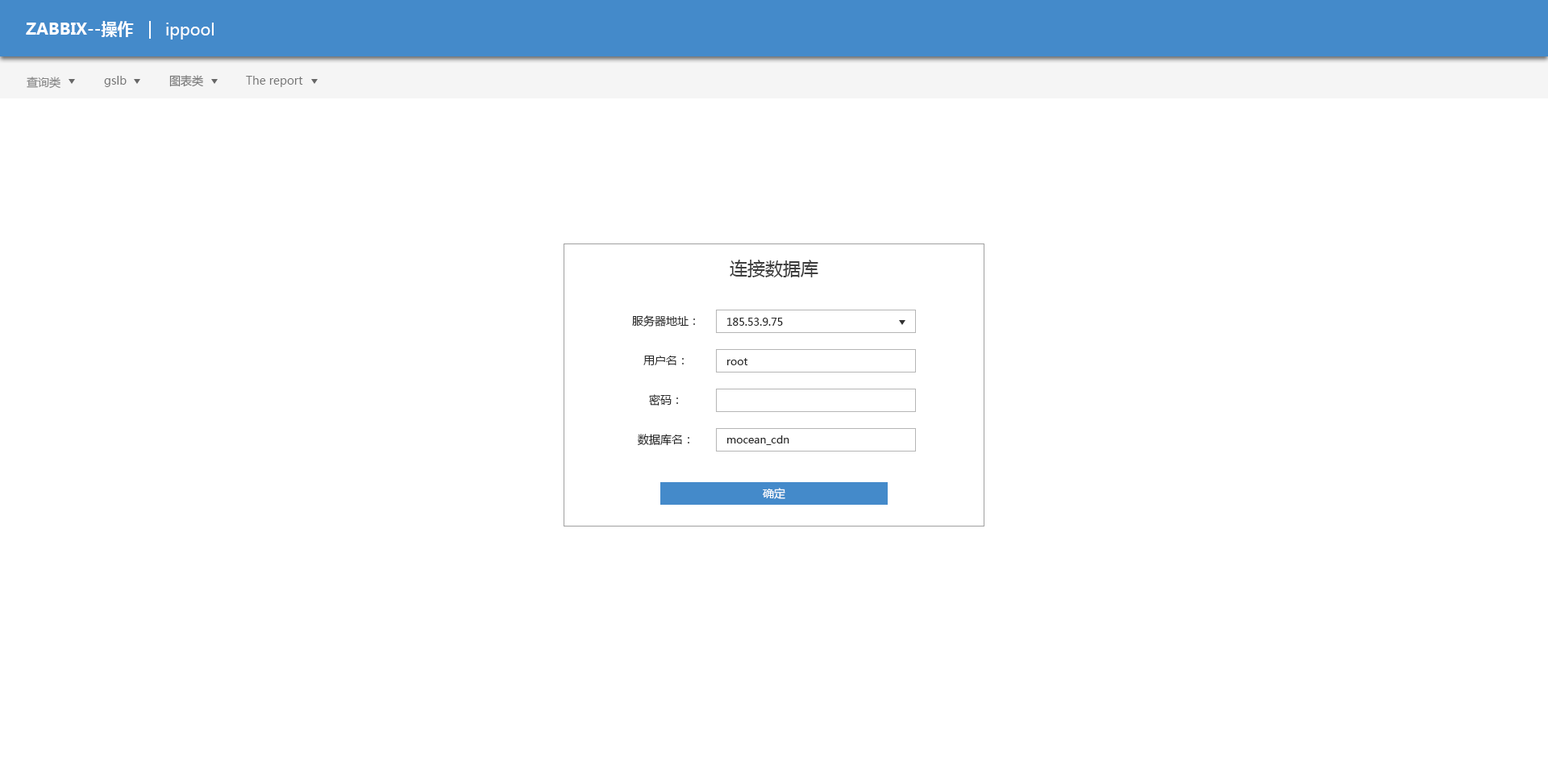
<style>
.page{position:relative;width:1548px;height:770px;background:#ffffff}
.page>*{position:absolute;margin:0}
.t1{font:16.1px "MicrosoftYaHei-Bold";color:#ffffff}
.t2{font:16.1px "MicrosoftYaHei";color:#ffffff}
.t3{font:11.3px "MicrosoftYaHei";color:#838383}
.t4{font:11.3px "MicrosoftYaHei";color:#767676}
.t5{font:17.7px "MicrosoftYaHei";color:#3e3e3e}
.t6{font:11.3px "MicrosoftYaHei";color:#292929}
.t7{font:10.5px "MicrosoftYaHei";color:#292929}
.t8{font:11.3px "MicrosoftYaHei";color:#ffffff}
</style>
<div class="page">
<p class="t1" style="left:26px;top:21px;width:108px;height:16px">ZABBIX--操作</p>
<p class="t2" style="left:166px;top:23px;width:48px;height:17px">ippool</p>
<p class="t3" style="left:27px;top:77px;width:33px;height:12px">查询类</p>
<p class="t4" style="left:104px;top:76px;width:23px;height:11px">gslb</p>
<p class="t4" style="left:169px;top:75px;width:34px;height:12px">图表类</p>
<p class="t4" style="left:246px;top:76px;width:57px;height:11px">The report</p>
<p class="t5" style="left:730px;top:260px;width:89px;height:17px">连接数据库</p>
<p class="t6" style="left:632px;top:315px;width:63px;height:12px">服务器地址：</p>
<p class="t7" style="left:727px;top:318px;width:56px;height:8px">185.53.9.75</p>
<p class="t6" style="left:644px;top:356px;width:40px;height:9px">用户名：</p>
<p class="t7" style="left:727px;top:358px;width:21px;height:7px">root</p>
<p class="t6" style="left:649px;top:394px;width:29px;height:12px">密码：</p>
<p class="t6" style="left:638px;top:434px;width:51px;height:12px">数据库名：</p>
<p class="t7" style="left:727px;top:435px;width:62px;height:10px">mocean_cdn</p>
<p class="t8" style="left:763px;top:488px;width:22px;height:11px">确定</p>
</div>
